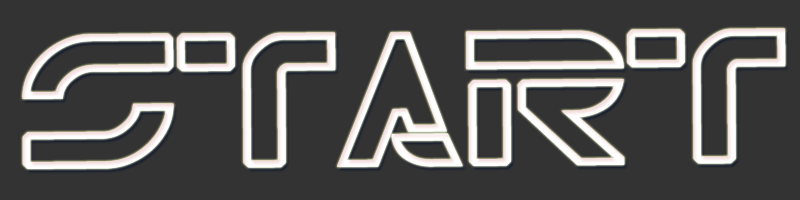
<style>
.page{position:relative;width:800px;height:200px;background:#333333}
.page>*{position:absolute;margin:0}
.t1{font:191.7px "TRN";color:#ffffff;scale:1.08 1}
</style>
<div class="page">
<p class="t1" style="left:22px;top:28px;width:764px;height:141px">Start</p>
</div>
